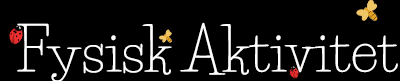
<style>
.page{position:relative;width:400px;height:81px;background:#000000}
.page>*{position:absolute;margin:0}
.t1{font:58.3px "LifeSavers-Regular";color:#ffffff}
</style>
<div class="page">
<p class="t1" style="left:17px;top:22px;width:381px;height:61px">Fysisk Aktivitet</p>
</div>
